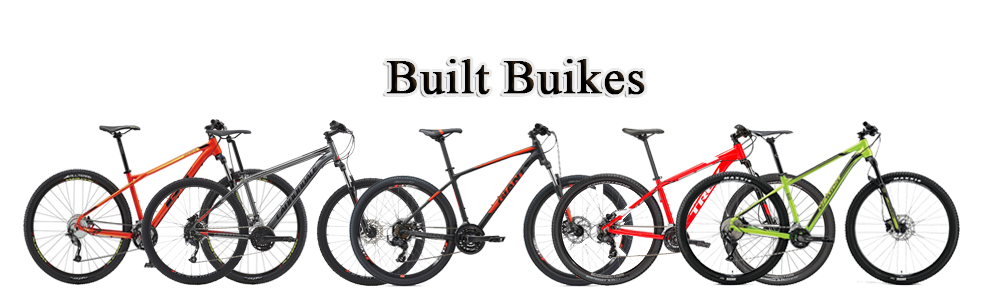
<style>
.page{position:relative;width:1002px;height:308px;background:#ffffff}
.page>*{position:absolute;margin:0}
.t1{font:48px "TimesNewRomanPSMT";letter-spacing:0.005em;color:#000000;font-weight:bold}
</style>
<div class="page">
<p class="t1" style="left:386px;top:59px;width:259px;height:36px">Built Buikes</p>
</div>
